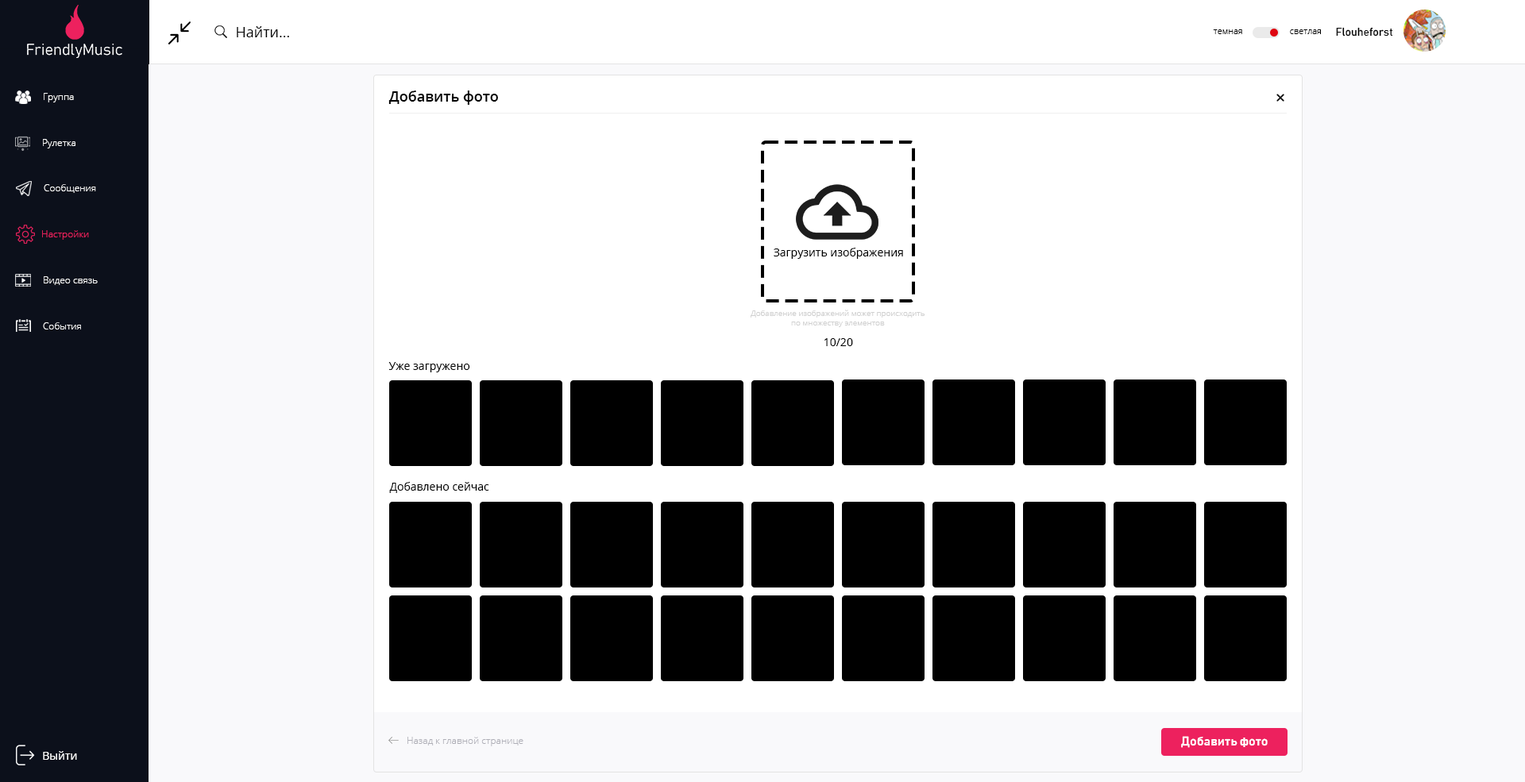
<style>
.page{position:relative;width:1525px;height:782px;background:#ffffff}
.page>*{position:absolute;margin:0}
.t1{font:14.3px "OpenSans";color:#000000}
.t2{font:8.7px "OpenSans-Light";color:#000000}
.t3{font:11.1px "Bahnschrift";color:#000000}
.t4{font:9.5px "OpenSans-Light";color:#ffffff}
.t5{font:14.3px "OpenSans-Semibold";color:#000000}
.t6{font:9.5px "OpenSans-Light";color:#ed215e}
.t7{font:11.1px "OpenSans";color:#000000}
.t8{font:7.9px "OpenSans-Light";color:#d0d0d0}
.t9{font:9.5px "OpenSans-Light";color:#afafb7}
.t10{font:12.7px "Bahnschrift-SemiBold";color:#ffffff}
.t11{font:11.1px "OpenSans";color:#ffffff}
</style>
<div class="page">
<p class="t1" style="left:237px;top:26px;width:52px;height:11px">Найти...</p>
<p class="t2" style="left:1213px;top:29px;width:29px;height:5px">темная</p>
<p class="t2" style="left:1290px;top:29px;width:31px;height:5px">светлая</p>
<p class="t3" style="left:1336px;top:27px;width:57px;height:10px">Flouheforst</p>
<p class="t4" style="left:44px;top:93px;width:30px;height:9px">Группа</p>
<p class="t5" style="left:388px;top:91px;width:110px;height:14px">Добавить фото</p>
<p class="t4" style="left:43px;top:139px;width:32px;height:9px">Рулетка</p>
<p class="t4" style="left:44px;top:184px;width:52px;height:9px">Сообщения</p>
<p class="t6" style="left:42px;top:230px;width:47px;height:10px">Настройки</p>
<p class="t7" style="left:773px;top:248px;width:130px;height:11px">Загрузить изображения</p>
<p class="t4" style="left:44px;top:276px;width:54px;height:9px">Видео связь</p>
<p class="t8" style="left:750px;top:310px;width:174px;height:17px;text-align:center">Добавление изображений может происходить<br>по множеству элементов</p>
<p class="t4" style="left:43px;top:322px;width:38px;height:8px">События</p>
<p class="t7" style="left:824px;top:338px;width:29px;height:8px">10/20</p>
<p class="t7" style="left:388px;top:362px;width:82px;height:10px">Уже загружено</p>
<p class="t7" style="left:389px;top:482px;width:100px;height:11px">Добавлено сейчас</p>
<p class="t9" style="left:407px;top:737px;width:116px;height:9px">Назад к главной странице</p>
<p class="t10" style="left:1181px;top:736px;width:86px;height:12px">Добавить фото</p>
<p class="t11" style="left:43px;top:751px;width:34px;height:9px">Выйти</p>
</div>
